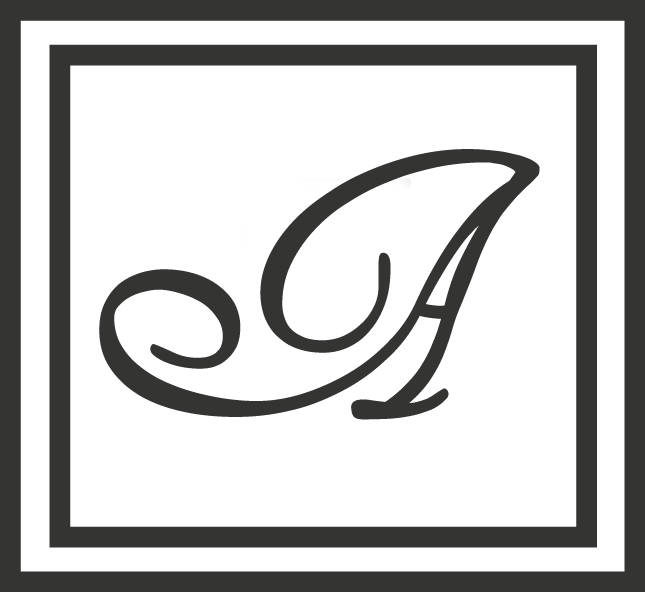
<style>
.page{position:relative;width:645px;height:592px;background:#ffffff}
.page>*{position:absolute;margin:0}
.t1{font:364.6px "HenryMorganHand";color:#343433;font-weight:bold}
</style>
<div class="page">
<p class="t1" style="left:99px;top:149px;width:441px;height:271px">A</p>
</div>
